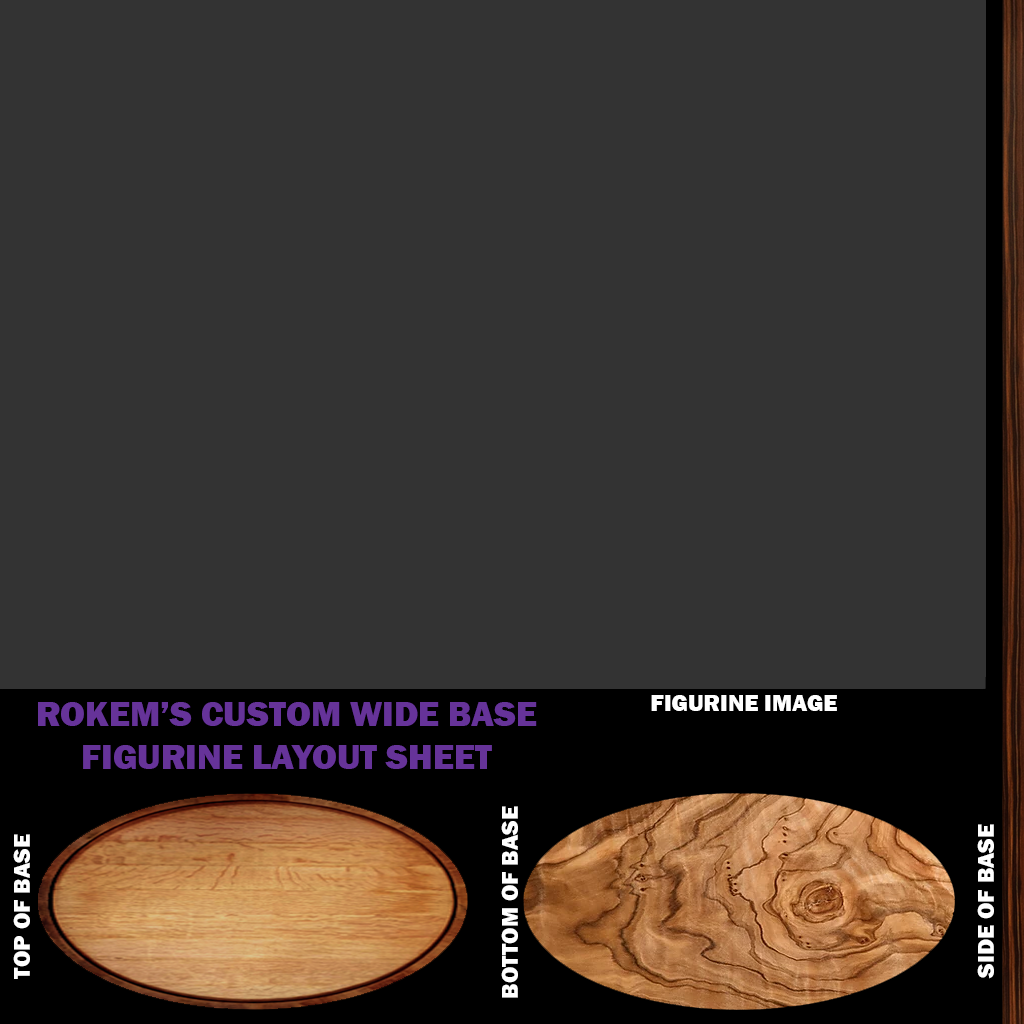
<style>
.page{position:relative;width:1024px;height:1024px;background:#333333}
.page>*{position:absolute;margin:0}
.t1{font:36px "FranklinGothic-Heavy";color:#663399}
.t2{font:24px "FranklinGothic-Heavy";color:#ffffff}
.t3{font:23.7px "FranklinGothic-Heavy";color:#ffffff}
</style>
<div class="page">
<p class="t1" style="left:38px;top:702px;width:499px;height:67px;text-align:center">ROKEM’S CUSTOM WIDE BASE FIGURINE LAYOUT SHEET</p>
<p class="t2" style="left:651px;top:695px;width:186px;height:16px">FIGURINE IMAGE</p>
<p class="t3" style="left:501px;top:806px;width:17px;height:192px;rotate:-90deg">BOTTOM OF BASE</p>
<p class="t3" style="left:977px;top:824px;width:17px;height:155px;rotate:-90deg">SIDE OF BASE</p>
<p class="t3" style="left:13px;top:834px;width:17px;height:145px;rotate:-90deg">TOP OF BASE</p>
</div>
